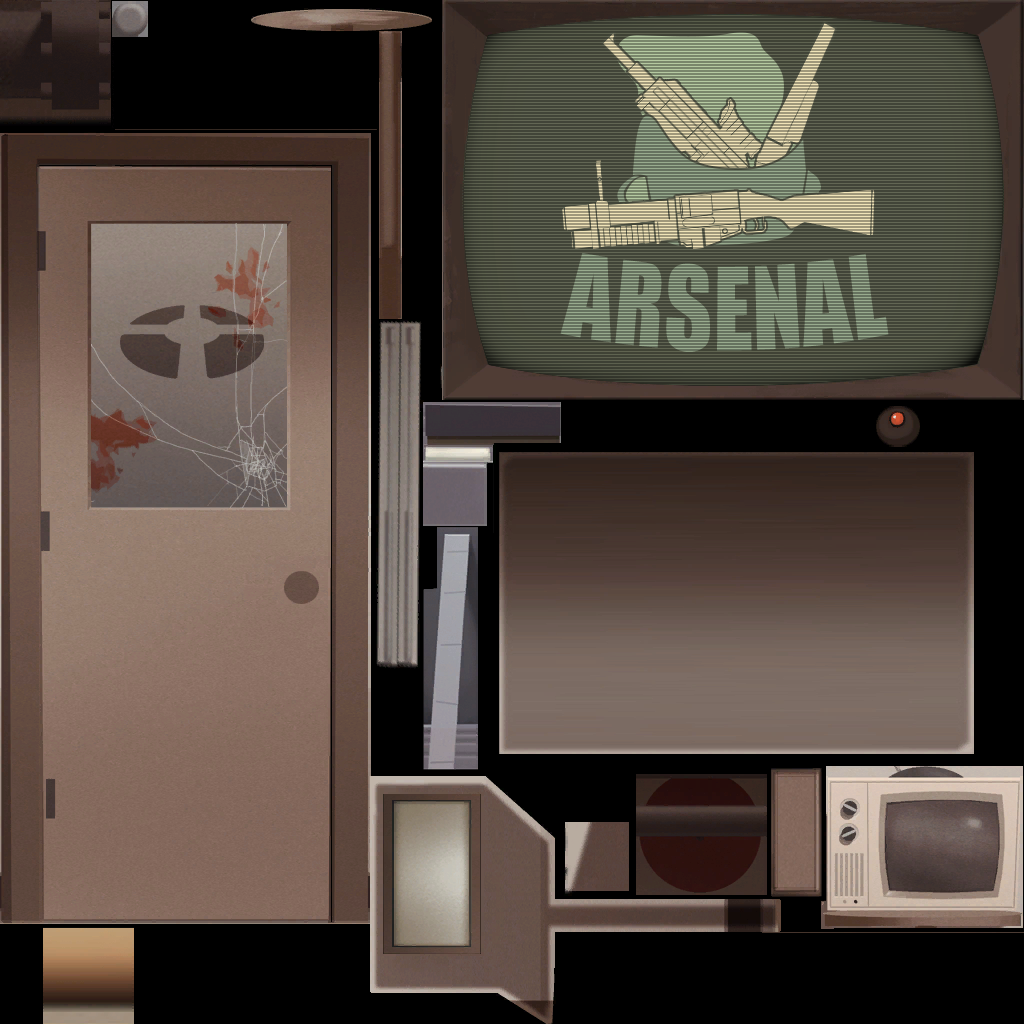
<style>
.page{position:relative;width:1024px;height:1024px}
.page>*{position:absolute;margin:0}
.t1{font:105.6px "Impact";scale:0.84 1}
</style>
<div class="page">
<p class="t1" style="left:560px;top:253px;width:329px;height:99px">ARSENAL</p>
</div>
